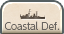
<style>
.page{position:relative;width:64px;height:34px}
.page>*{position:absolute;margin:0}
.t1{font:10px "UDShinGoPro-Light";color:#6a6560;scale:0.9 1}
</style>
<div class="page">
<p class="t1" style="left:4px;top:21px;width:56px;height:9px">Coastal Def.</p>
</div>
